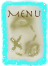
<style>
.page{position:relative;width:48px;height:66px}
.page>*{position:absolute;margin:0}
.t1{font:11px "Herculanum";color:#603913}
</style>
<div class="page">
<p class="t1" style="left:8px;top:10px;width:33px;height:8px">Menu</p>
</div>
